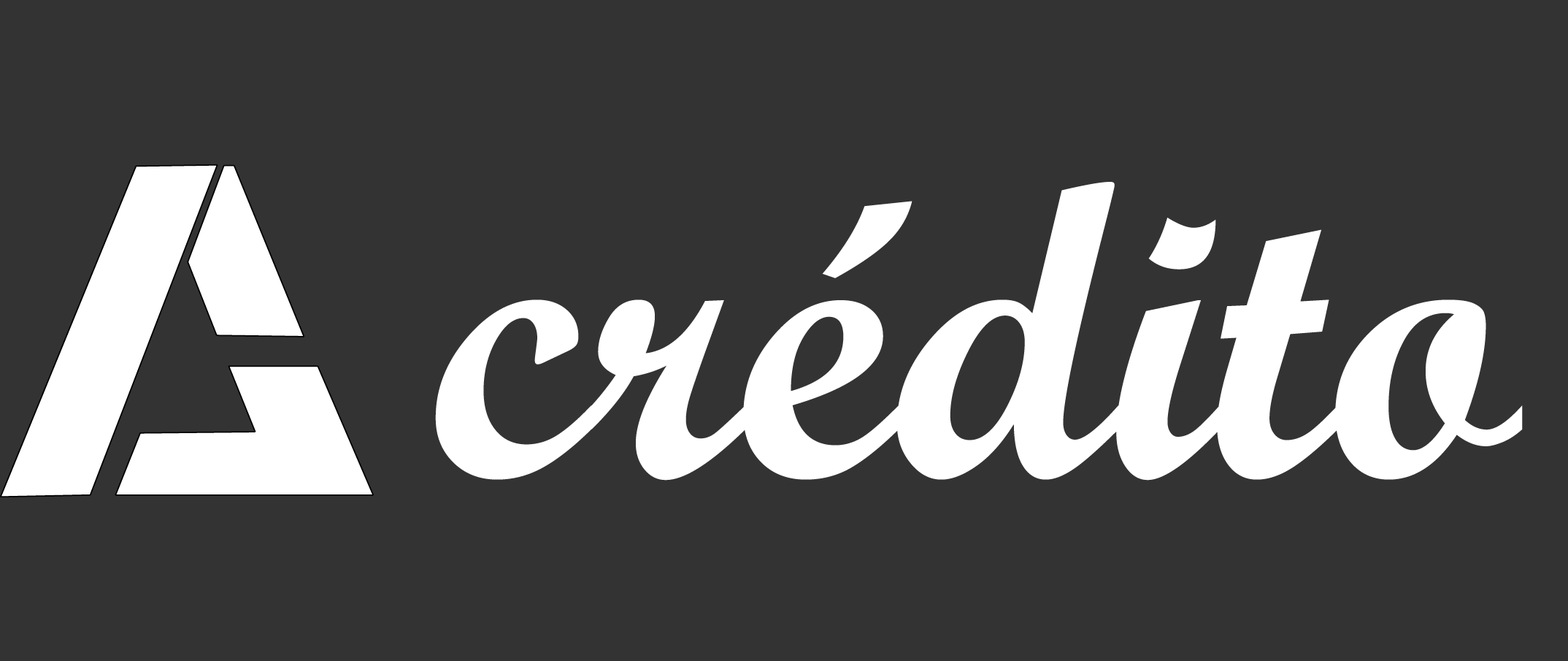
<style>
.page{position:relative;width:1568px;height:661px;background:#333333}
.page>*{position:absolute;margin:0}
.t1{font:421.3px "ScriptMTBold";color:#ffffff}
</style>
<div class="page">
<p class="t1" style="left:435px;top:182px;width:1088px;height:298px">crédito</p>
</div>
